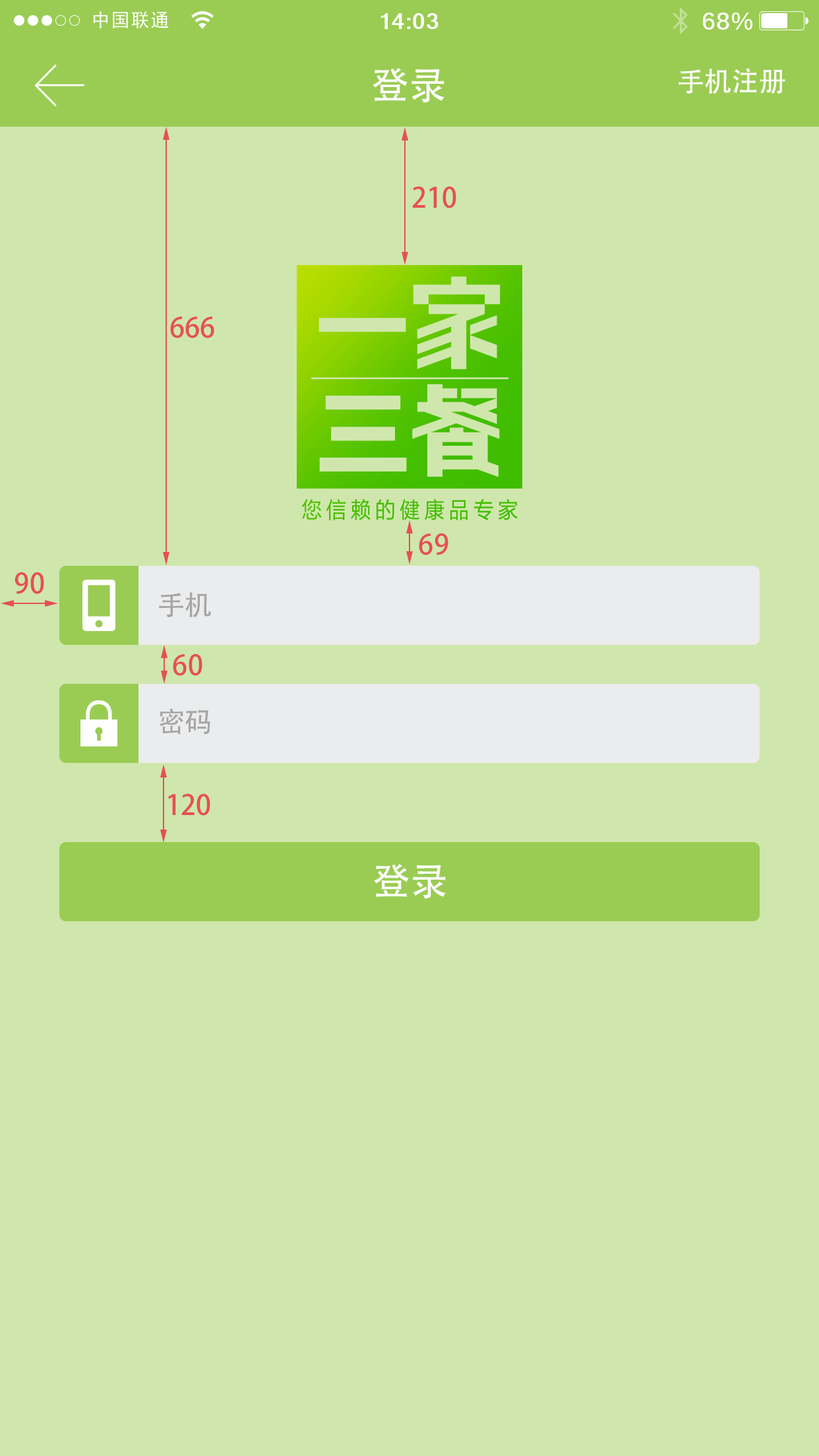
<style>
.page{position:relative;width:819px;height:1456px;background:#cfe7ac}
.page>*{position:absolute;margin:0}
.t1{font:38.2px "AdobeHeitiStd-Regular";color:#fefffe}
.t2{font:27.7px "AdobeHeitiStd-Regular";color:#fefffe}
.t3{font:27.7px "AdobeHeitiStd-Regular";color:#e55053}
.t4{font:27.7px "AdobeHeitiStd-Regular";color:#a6a6a6}
</style>
<div class="page">
<p class="t1" style="left:373px;top:68px;width:71px;height:35px">登录</p>
<p class="t2" style="left:679px;top:68px;width:106px;height:26px">手机注册</p>
<p class="t3" style="left:412px;top:186px;width:44px;height:22px">210</p>
<p class="t3" style="left:170px;top:317px;width:44px;height:21px">666</p>
<p class="t3" style="left:419px;top:533px;width:29px;height:22px">69</p>
<p class="t3" style="left:15px;top:572px;width:29px;height:22px">90</p>
<p class="t4" style="left:159px;top:592px;width:53px;height:26px">手机</p>
<p class="t3" style="left:173px;top:653px;width:29px;height:23px">60</p>
<p class="t4" style="left:159px;top:708px;width:51px;height:27px">密码</p>
<p class="t3" style="left:168px;top:793px;width:42px;height:23px">120</p>
<p class="t1" style="left:374px;top:864px;width:72px;height:35px">登录</p>
</div>
